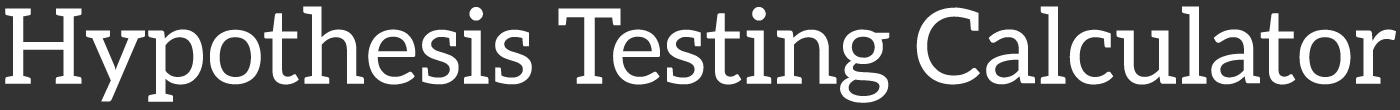
<style>
.page{position:relative;width:1400px;height:110px;background:#333333}
.page>*{position:absolute;margin:0}
.t1{font:104.6px "Aleo-Regular";color:#ffffff}
</style>
<div class="page">
<p class="t1" style="left:5px;top:6px;width:1391px;height:97px">Hypothesis Testing Calculator</p>
</div>
